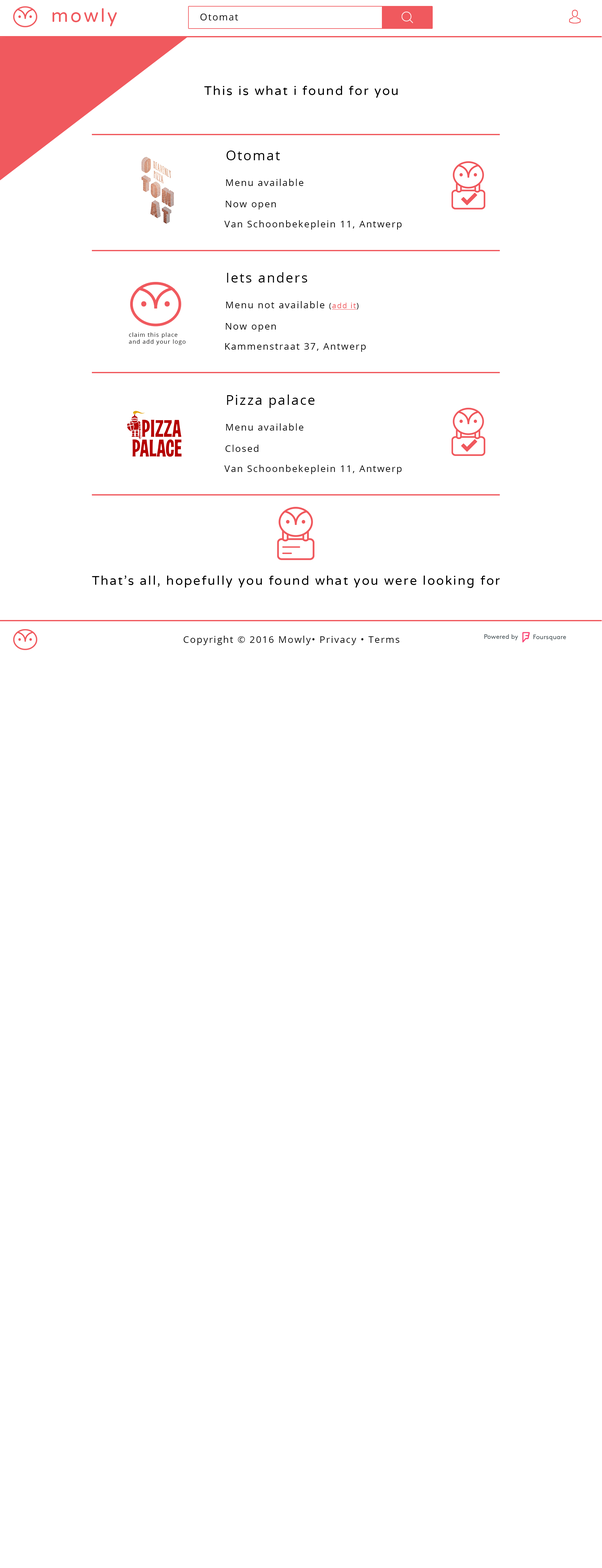
<style>
.page{position:relative;width:602px;height:1568px;background:#ffffff}
.page>*{position:absolute;margin:0}
.t1{font:18.8px "VarelaRound";letter-spacing:0.1em;color:#f0595e}
.t2{font:9.4px "OpenSans";letter-spacing:0.1em;color:#000000}
.t3{font:12.6px "VarelaRound";letter-spacing:0.1em;color:#000000}
.t4{font:13.3px "OpenSans";letter-spacing:0.1em;color:#000000}
.t5{font:7.5px "OpenSans";letter-spacing:0.1em;color:#000000}
.t6{font:7.5px "OpenSans";letter-spacing:0.1em;color:#f0595e;text-decoration:underline}
.t7{font:5.6px "OpenSans";letter-spacing:0.1em;color:#000000}
</style>
<div class="page">
<p class="t1" style="left:52px;top:8px;width:65px;height:18px">mowly</p>
<p class="t2" style="left:200px;top:13px;width:38px;height:8px">Otomat</p>
<p class="t3" style="left:204px;top:86px;width:194px;height:12px">This is what i found for you</p>
<p class="t4" style="left:226px;top:151px;width:54px;height:9px">Otomat</p>
<p class="t2" style="left:226px;top:179px;width:78px;height:7px">Menu available</p>
<p class="t2" style="left:226px;top:201px;width:50px;height:8px">Now open</p>
<p class="t2" style="left:224px;top:220px;width:178px;height:10px">Van Schoonbekeplein 11, Antwerp</p>
<p class="t4" style="left:227px;top:272px;width:80px;height:11px">Iets anders</p>
<p class="t2" style="left:226px;top:301px;width:133px;height:9px">Menu not available <span class="t5">(</span><span class="t6">add it</span><span class="t5">)</span></p>
<p class="t2" style="left:226px;top:323px;width:50px;height:9px">Now open</p>
<p class="t7" style="left:129px;top:332px;width:57px;height:13px">claim this place<br>and add your logo</p>
<p class="t2" style="left:225px;top:343px;width:141px;height:9px">Kammenstraat 37, Antwerp</p>
<p class="t4" style="left:227px;top:395px;width:88px;height:13px">Pizza palace</p>
<p class="t2" style="left:226px;top:423px;width:78px;height:8px">Menu available</p>
<p class="t2" style="left:225px;top:445px;width:33px;height:7px">Closed</p>
<p class="t2" style="left:224px;top:465px;width:178px;height:9px">Van Schoonbekeplein 11, Antwerp</p>
<p class="t3" style="left:92px;top:575px;width:408px;height:13px">That’s all, hopefully you found what you were looking for</p>
<p class="t2" style="left:183px;top:636px;width:217px;height:9px">Copyright © 2016 Mowly• Privacy • Terms</p>
</div>
